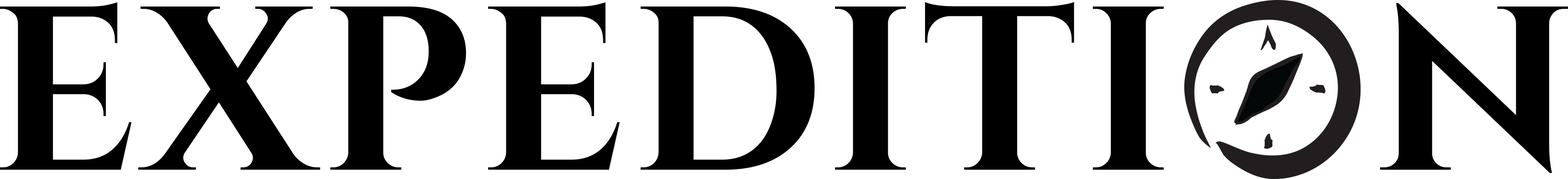
<style>
.page{position:relative;width:1568px;height:179px;background:#ffffff}
.page>*{position:absolute;margin:0}
.t1{font:233.1px "Cinzel-Bold";letter-spacing:0.027em;color:#000000}
</style>
<div class="page">
<p class="t1" style="left:0px;top:2px;width:1568px;height:171px">EXPEDITI   N</p>
</div>
